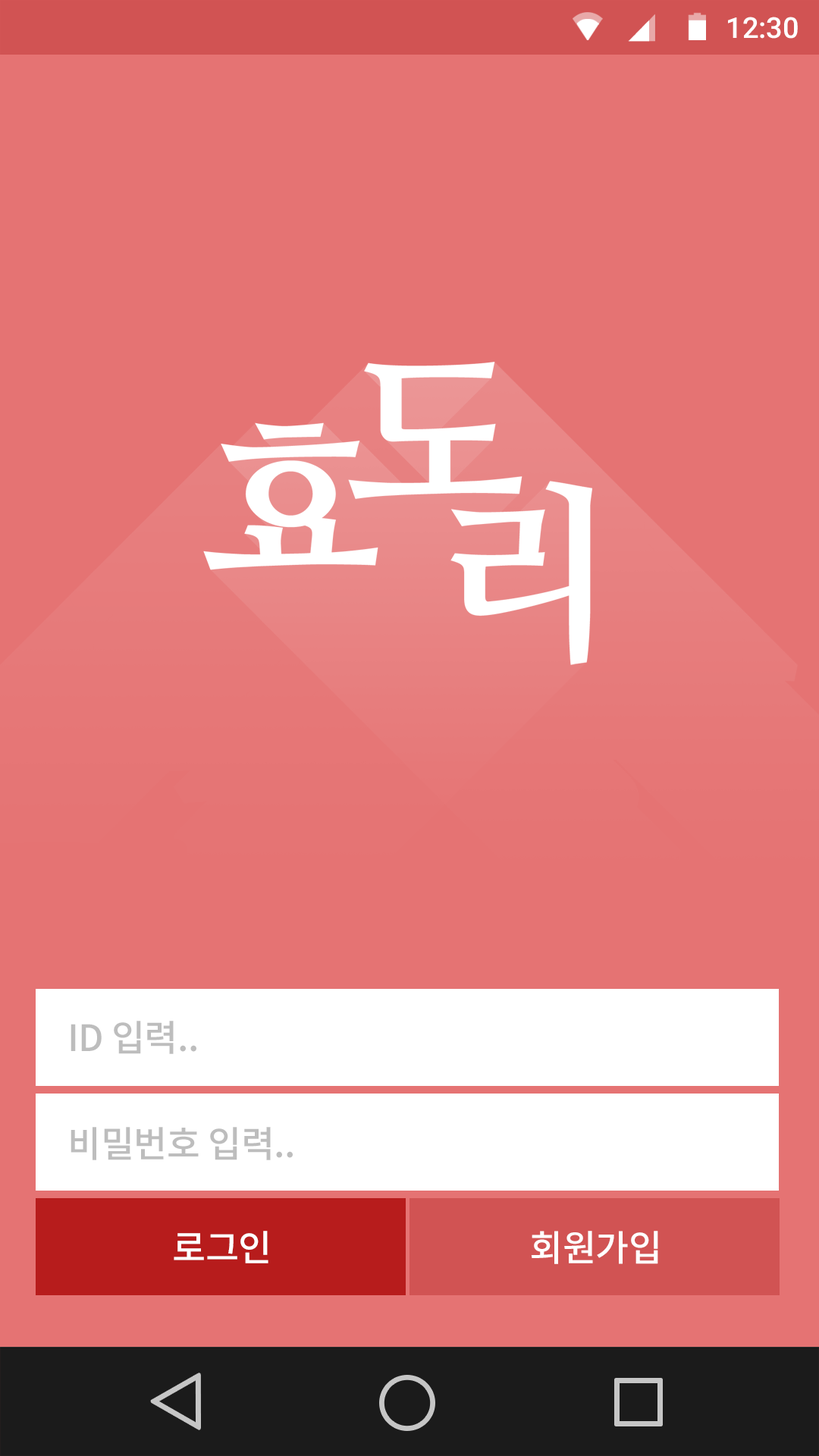
<style>
.page{position:relative;width:819px;height:1456px;background:#e57373}
.page>*{position:absolute;margin:0}
.t1{font:28.8px "Roboto-Medium";color:#ffffff}
.t2{font:36.4px "NotoSansCJKkr-Medium";letter-spacing:-0.01em;color:#bdbdbd}
.t3{font:36.4px "NotoSansCJKkr-Medium";letter-spacing:-0.01em;color:#ffffff}
</style>
<div class="page">
<p class="t1" style="left:728px;top:17px;width:70px;height:22px">12:30</p>
<p class="t2" style="left:71px;top:1021px;width:125px;height:33px">ID 입력..</p>
<p class="t2" style="left:71px;top:1127px;width:222px;height:33px">비밀번호 입력..</p>
<p class="t3" style="left:174px;top:1231px;width:94px;height:32px">로그인</p>
<p class="t3" style="left:531px;top:1231px;width:127px;height:33px">회원가입</p>
</div>
